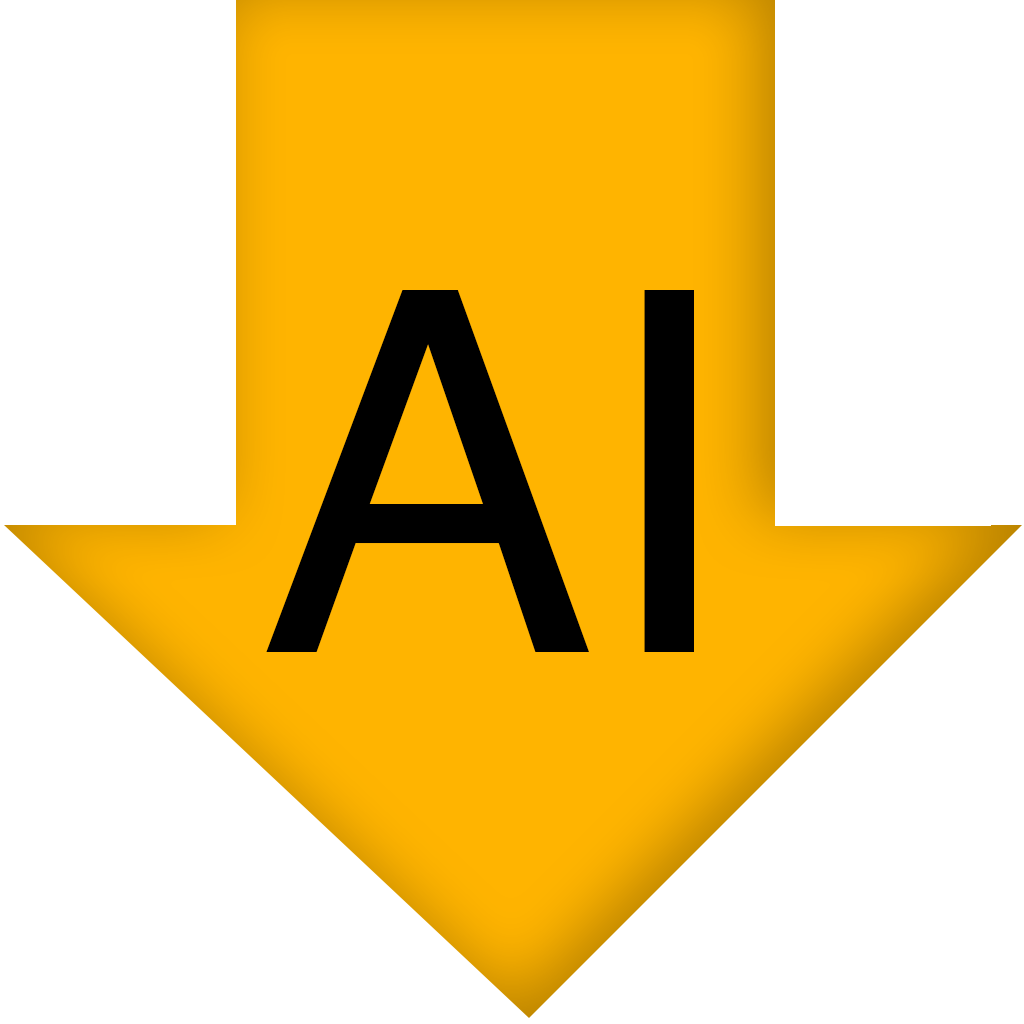
<style>
.page{position:relative;width:1024px;height:1024px;background:#ffffff}
.page>*{position:absolute;margin:0}
.t1{font:504px "Helvetica";color:#000000}
</style>
<div class="page">
<p class="t1" style="left:266px;top:290px;width:428px;height:362px">AI</p>
</div>
